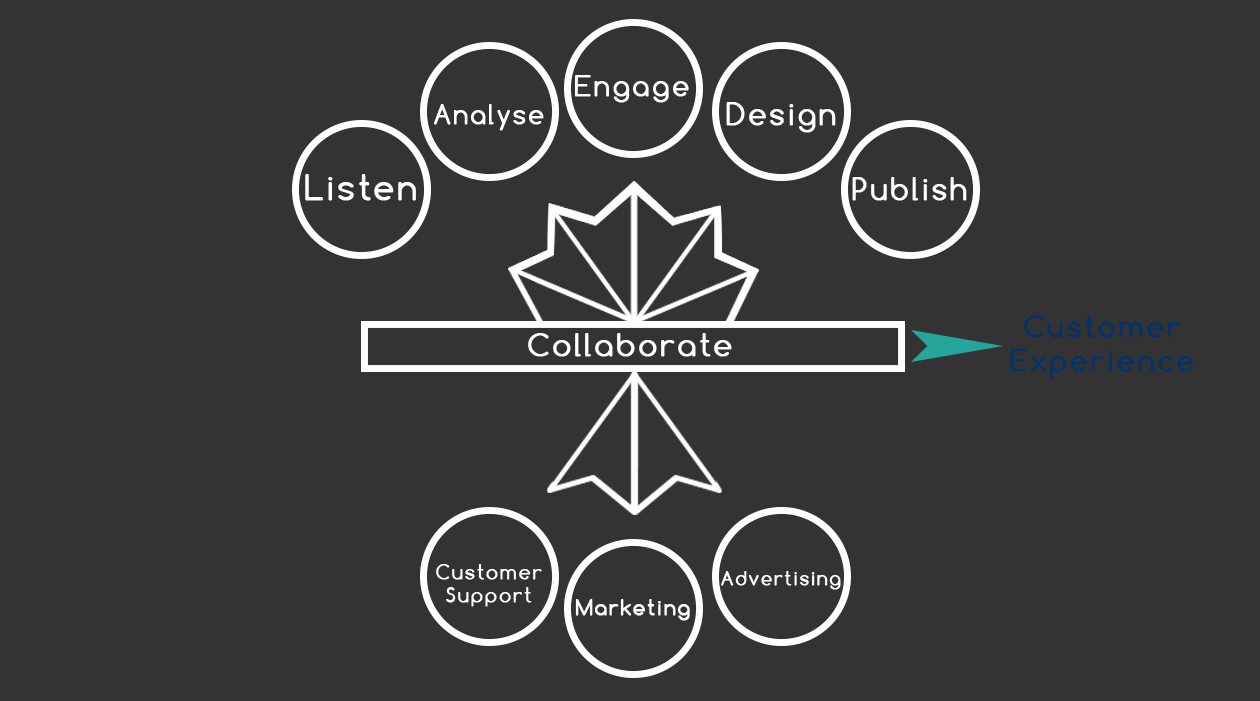
<style>
.page{position:relative;width:1260px;height:701px;background:#333333}
.page>*{position:absolute;margin:0}
.t1{font:27.1px "Comfortaa";letter-spacing:0.08em;color:#ffffff;font-weight:bold}
.t2{font:29.2px "Comfortaa";letter-spacing:0.08em;color:#ffffff;font-weight:bold}
.t3{font:24.5px "Comfortaa";letter-spacing:0.08em;color:#ffffff;font-weight:bold}
.t4{font:32.6px "Comfortaa";letter-spacing:0.08em;color:#ffffff;font-weight:bold}
.t5{font:28.5px "Comfortaa";letter-spacing:0.08em;color:#04326a;font-weight:bold}
.t6{font:29.9px "Comfortaa";letter-spacing:0.08em;color:#ffffff;font-weight:bold}
.t7{font:19.2px "Comfortaa";letter-spacing:0.08em;color:#ffffff;font-weight:bold}
.t8{font:18px "Comfortaa";letter-spacing:0.08em;color:#ffffff;font-weight:bold}
.t9{font:19.8px "Comfortaa";letter-spacing:0.08em;color:#ffffff;font-weight:bold}
</style>
<div class="page">
<p class="t1" style="left:575px;top:75px;width:114px;height:28px">Engage</p>
<p class="t2" style="left:726px;top:102px;width:110px;height:31px">Design</p>
<p class="t3" style="left:434px;top:104px;width:110px;height:27px">Analyse</p>
<p class="t4" style="left:305px;top:174px;width:111px;height:27px">Listen</p>
<p class="t2" style="left:852px;top:177px;width:115px;height:24px">Publish</p>
<p class="t5" style="left:1010px;top:315px;width:184px;height:64px;text-align:center">Customer<br>Experience</p>
<p class="t6" style="left:528px;top:333px;width:204px;height:24px">Collaborate</p>
<p class="t7" style="left:436px;top:564px;width:106px;height:43px;text-align:center">Customer<br>Support</p>
<p class="t8" style="left:721px;top:571px;width:120px;height:19px">Advertising</p>
<p class="t9" style="left:575px;top:599px;width:115px;height:22px">Marketing</p>
</div>
